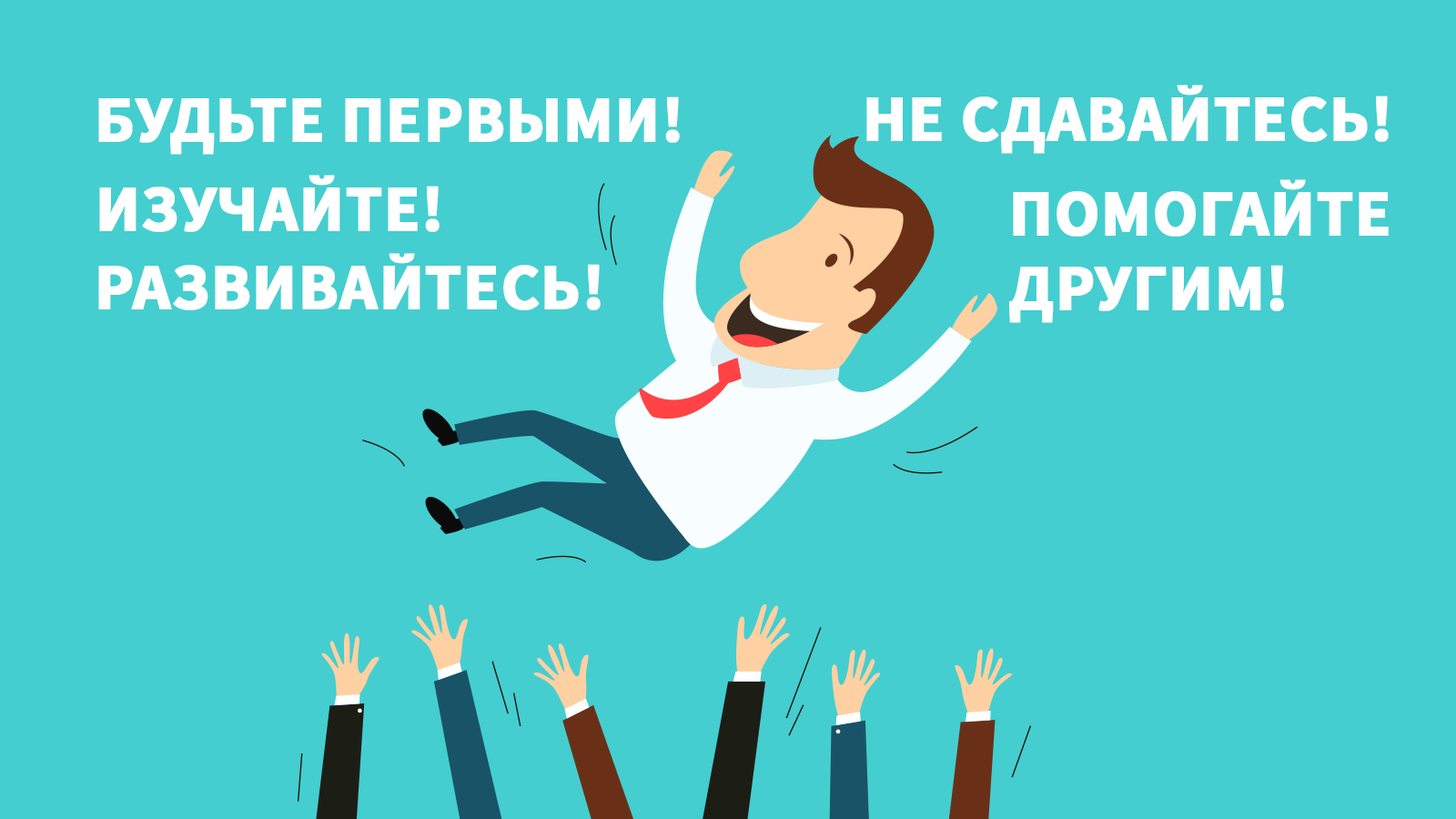
<style>
.page{position:relative;width:1456px;height:819px;background:#44ced0}
.page>*{position:absolute;margin:0}
.t1{font:65.5px "SourceSansPro-Bold";color:#ffffff;text-transform:uppercase;font-weight:bold}
.t2{font:65.5px/65.5px "SourceSansPro-Bold";color:#ffffff;text-transform:uppercase;font-weight:bold}
</style>
<div class="page">
<p class="t1" style="left:866px;top:85px;width:523px;height:69px">не сдавайтесь!</p>
<p class="t1" style="left:98px;top:96px;width:582px;height:59px">будьте первыми!</p>
<p class="t1" style="left:99px;top:175px;width:341px;height:57px">изучайте!</p>
<p class="t2" style="left:1009px;top:179px;width:380px;height:144px">помогайте<br>другим!</p>
<p class="t1" style="left:98px;top:253px;width:503px;height:57px">развивайтесь!</p>
</div>
